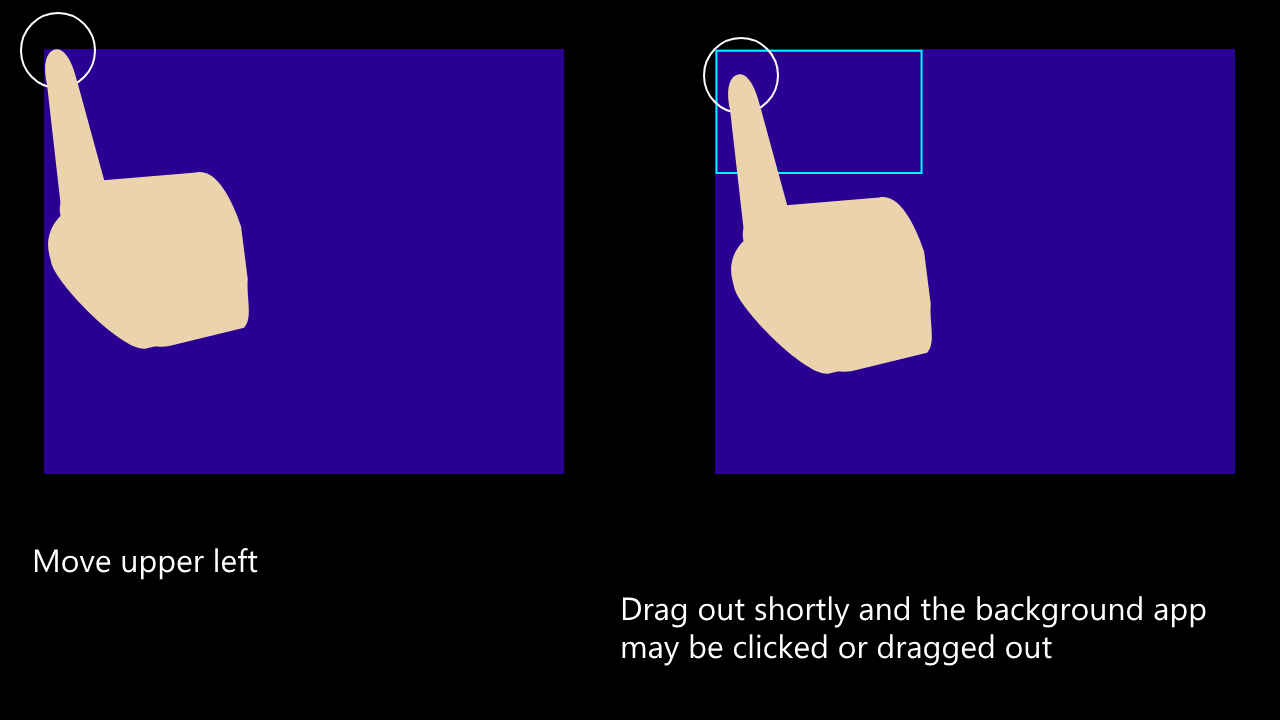
<style>
.page{position:relative;width:1280px;height:720px;background:#000000}
.page>*{position:absolute;margin:0}
.t1{font:32px "SegoeUI";color:#ffffff}
</style>
<div class="page">
<p class="t1" style="left:34px;top:547px;width:224px;height:33px">Move upper left</p>
<p class="t1" style="left:622px;top:596px;width:584px;height:70px">Drag out shortly and the background app<br>may be clicked or dragged out</p>
</div>
